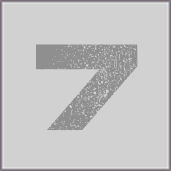
<style>
.page{position:relative;width:171px;height:171px;background:#d1d1d1}
.page>*{position:absolute;margin:0}
.t1{font:121px "Coalition";color:#8f8f8f}
</style>
<div class="page">
<p class="t1" style="left:36px;top:44px;width:102px;height:87px">7</p>
<p class="t1" style="left:36px;top:44px;width:102px;height:87px">7</p>
<p class="t1" style="left:36px;top:44px;width:102px;height:87px">7</p>
</div>
